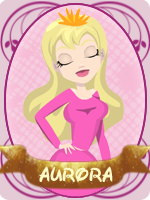
<style>
.page{position:relative;width:150px;height:200px}
.page>*{position:absolute;margin:0}
.t1{font:37.4px "Waltograph";color:#fcfac7}
</style>
<div class="page">
<p class="t1" style="left:39px;top:166px;width:74px;height:16px">aurora</p>
</div>
